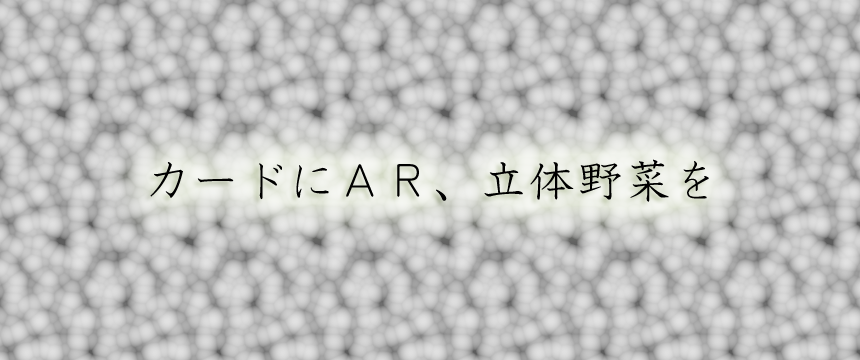
<style>
.page{position:relative;width:860px;height:360px}
.page>*{position:absolute;margin:0}
.t1{font:48px "HGKyokashotai";color:#000000}
</style>
<div class="page">
<p class="t1" style="left:150px;top:159px;width:559px;height:43px">カードにＡＲ、立体野菜を</p>
</div>
